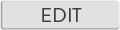
<style>
.page{position:relative;width:120px;height:30px;background:#dfe1e2}
.page>*{position:absolute;margin:0}
.t1{font:19.6px "BrandonGrotesque-Regular";color:#404041}
</style>
<div class="page">
<p class="t1" style="left:42px;top:8px;width:40px;height:14px">EDIT</p>
</div>
